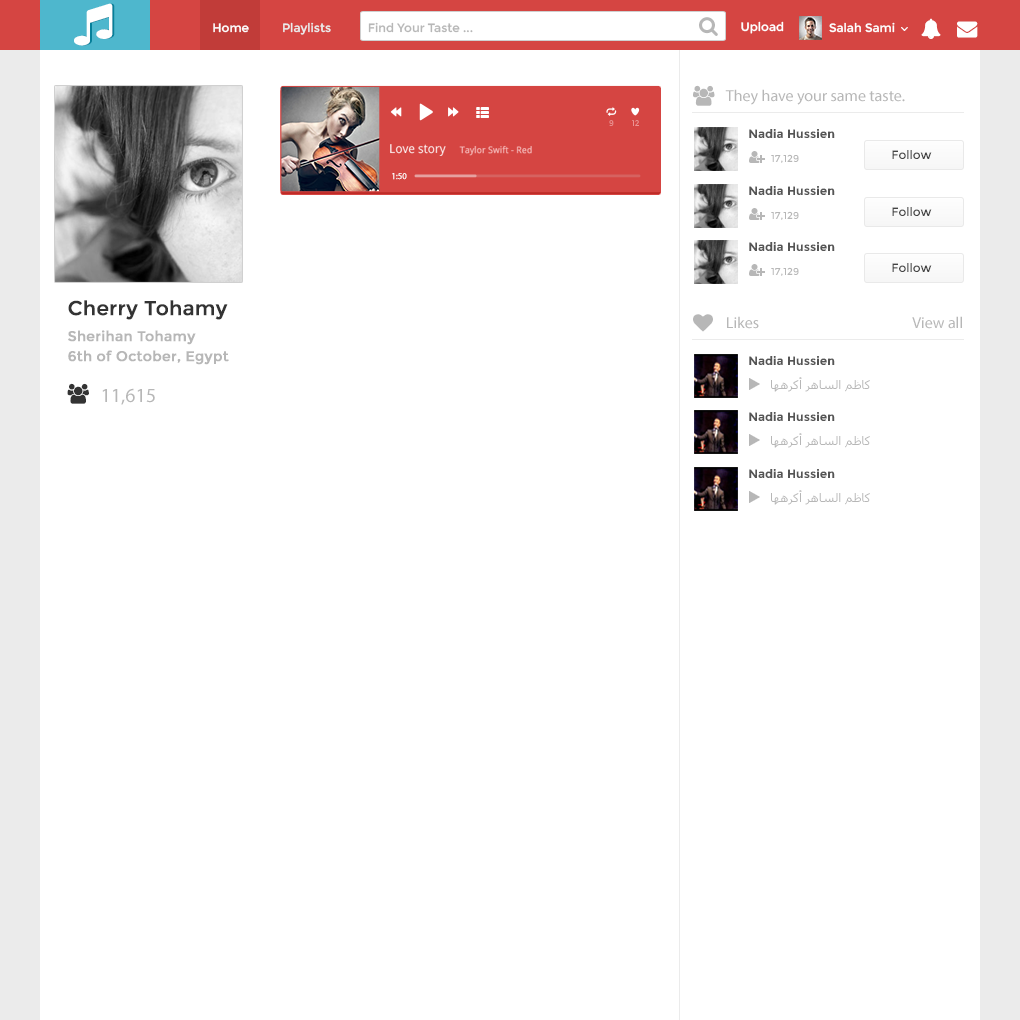
<style>
.page{position:relative;width:1020px;height:1020px;background:#ffffff}
.page>*{position:absolute;margin:0}
.t1{font:12px "Montserrat-Regular";color:#ffffff}
.t2{font:12px "Montserrat-Regular";color:#ebebeb}
.t3{font:12px "Montserrat-Regular";color:#b7b7b7}
.t4{font:16px "MyriadPro-Regular";color:#b7b7b7}
.t5{font:8.3px "Montserrat-Regular";color:#eb9594;scale:0.94 1}
.t6{font:12px "Montserrat-Bold";color:#555555}
.t7{font:9px "OpenSans";color:#f3b5b4;font-weight:bold;scale:0.94 1}
.t8{font:12.5px "OpenSans";color:#ffffff;scale:0.94 1}
.t9{font:12px "Montserrat-Regular";color:#444444}
.t10{font:10px "Montserrat-Regular";color:#b7b7b7}
.t11{font:9px "MyriadPro-Regular";color:#ffffff;font-weight:bold;scale:0.94 1}
.t12{font:20px "Montserrat-Regular";color:#333333;font-weight:bold}
.t13{font:14px/20px "Montserrat-Regular";color:#b7b7b7;font-weight:bold}
.t14{font:12px "Tahoma";color:#b7b7b7}
.t15{font:20px "MyriadPro-Regular";color:#b7b7b7}
</style>
<div class="page">
<p class="t1" style="left:213px;top:23px;width:36px;height:10px">Home</p>
<p class="t2" style="left:283px;top:22px;width:48px;height:13px">Playlists</p>
<p class="t3" style="left:368px;top:22px;width:105px;height:11px">Find Your Taste ...</p>
<p class="t1" style="left:741px;top:21px;width:43px;height:13px">Upload</p>
<p class="t1" style="left:829px;top:22px;width:66px;height:11px">Salah Sami</p>
<p class="t4" style="left:725px;top:89px;width:180px;height:16px">They have your same taste.</p>
<p class="t5" style="left:609px;top:120px;width:5px;height:6px">9</p>
<p class="t5" style="left:632px;top:120px;width:7px;height:6px">12</p>
<p class="t6" style="left:749px;top:129px;width:86px;height:9px">Nadia Hussien</p>
<p class="t7" style="left:390px;top:144px;width:142px;height:12px"><span class="t8">Love story </span>Taylor Swift - Red</p>
<p class="t9" style="left:892px;top:150px;width:40px;height:9px">Follow</p>
<p class="t10" style="left:771px;top:154px;width:28px;height:9px">17,129</p>
<p class="t11" style="left:392px;top:173px;width:15px;height:7px">1:50</p>
<p class="t6" style="left:749px;top:186px;width:86px;height:9px">Nadia Hussien</p>
<p class="t9" style="left:892px;top:207px;width:40px;height:9px">Follow</p>
<p class="t10" style="left:771px;top:211px;width:28px;height:9px">17,129</p>
<p class="t6" style="left:749px;top:242px;width:86px;height:9px">Nadia Hussien</p>
<p class="t10" style="left:771px;top:267px;width:28px;height:9px">17,129</p>
<p class="t9" style="left:892px;top:263px;width:40px;height:9px">Follow</p>
<p class="t12" style="left:68px;top:300px;width:160px;height:20px">Cherry Tohamy</p>
<p class="t4" style="left:727px;top:316px;width:32px;height:13px">Likes</p>
<p class="t4" style="left:912px;top:316px;width:50px;height:13px">View all</p>
<p class="t13" style="left:68px;top:330px;width:161px;height:35px">Sherihan Tohamy <br>6th of October, Egypt</p>
<p class="t6" style="left:749px;top:356px;width:86px;height:9px">Nadia Hussien</p>
<p class="t14" style="left:771px;top:377px;width:99px;height:15px">كاظم الساهر أكرهها</p>
<p class="t15" style="left:102px;top:388px;width:53px;height:17px">11,615</p>
<p class="t6" style="left:749px;top:412px;width:86px;height:9px">Nadia Hussien</p>
<p class="t14" style="left:771px;top:433px;width:99px;height:15px">كاظم الساهر أكرهها</p>
<p class="t6" style="left:749px;top:469px;width:86px;height:9px">Nadia Hussien</p>
<p class="t14" style="left:771px;top:490px;width:99px;height:15px">كاظم الساهر أكرهها</p>
</div>
